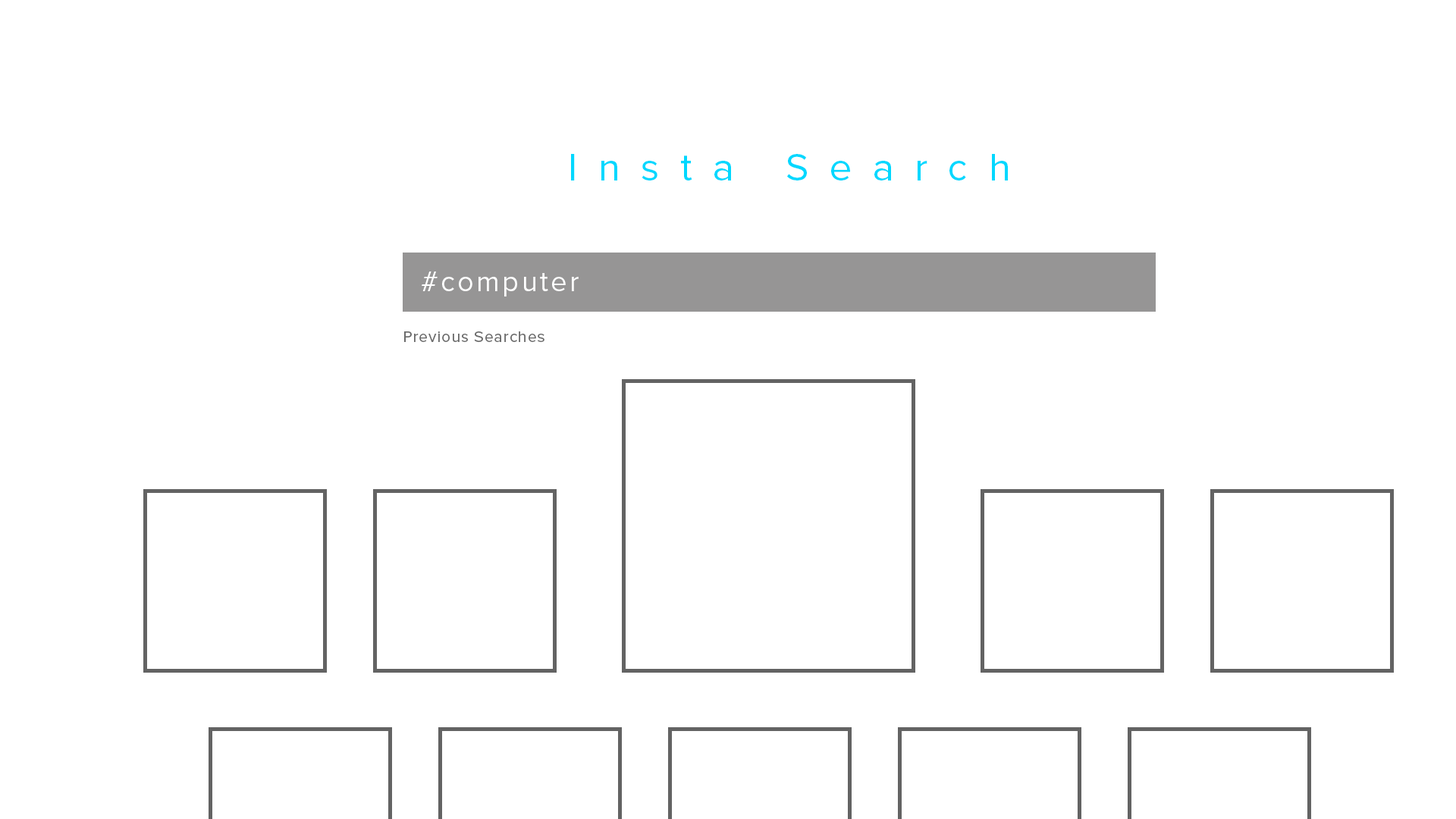
<style>
.page{position:relative;width:1456px;height:819px;background:#ffffff}
.page>*{position:absolute;margin:0}
.t1{font:39.4px "ProximaNova-Regular";letter-spacing:0.53em;color:#00d8ff}
.t2{font:28.8px "ProximaNova-Regular";letter-spacing:0.09em;color:#ffffff}
.t3{font:15.9px "ProximaNova-Regular";letter-spacing:0.05em;color:#6b6b6b}
</style>
<div class="page">
<p class="t1" style="left:571px;top:154px;width:437px;height:26px">Insta Search</p>
<p class="t2" style="left:422px;top:271px;width:157px;height:26px">#computer</p>
<p class="t3" style="left:404px;top:331px;width:140px;height:11px">Previous Searches</p>
</div>
